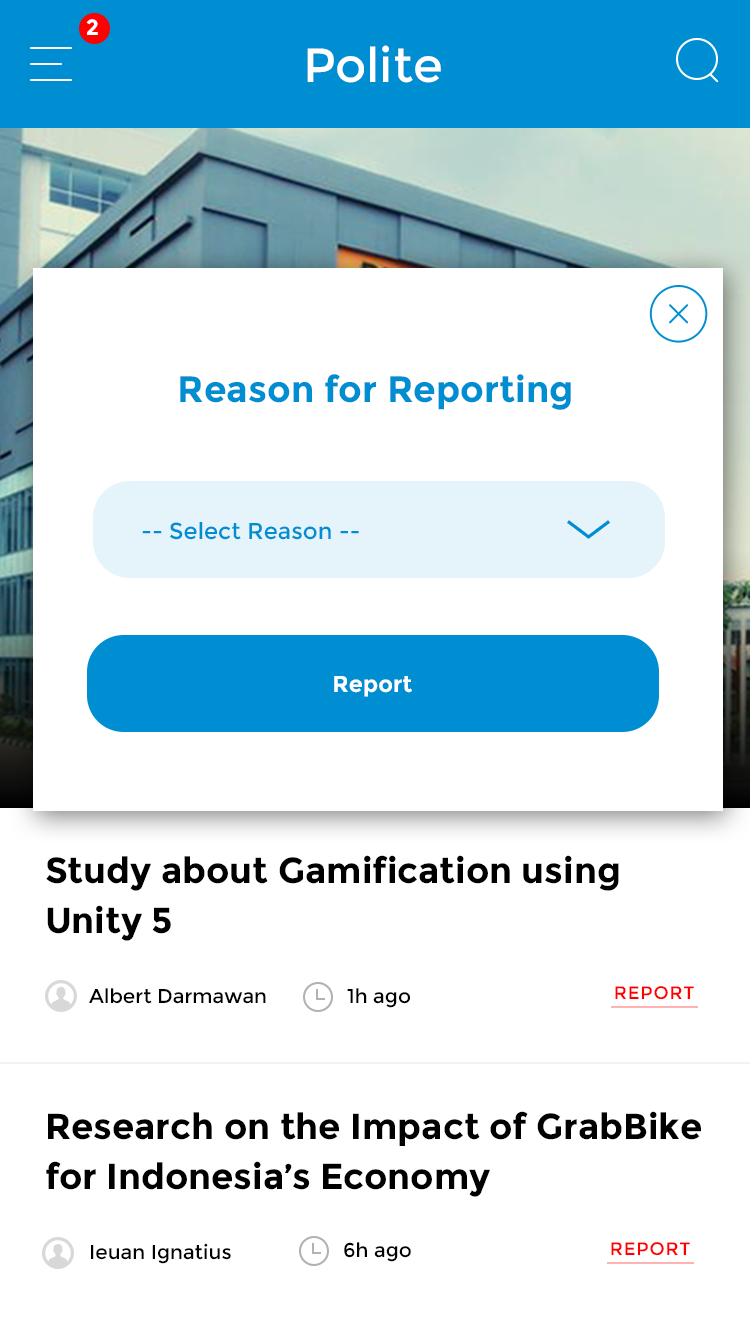
<style>
.page{position:relative;width:750px;height:1334px;background:#ffffff}
.page>*{position:absolute;margin:0}
.t1{font:22px "Montserrat-Bold";letter-spacing:0.05em;color:#ffffff}
.t2{font:48px "Montserrat-Regular";color:#ffffff}
.t3{font:36.6px "Montserrat-Bold";color:#008ed3}
.t4{font:22.9px "Montserrat-Regular";color:#008ed3}
.t5{font:22.9px "Montserrat-Bold";color:#ffffff}
.t6{font:36px/50px "Montserrat-Bold";color:#000000}
.t7{font:20px "Montserrat-Regular";color:#000000}
.t8{font:18px "Montserrat-Regular";letter-spacing:0.05em;color:#ff0000}
</style>
<div class="page">
<p class="t1" style="left:86px;top:19px;width:12px;height:16px">2</p>
<p class="t2" style="left:307px;top:45px;width:134px;height:38px">Polite</p>
<p class="t3" style="left:180px;top:374px;width:391px;height:36px">Reason for Reporting</p>
<p class="t4" style="left:142px;top:522px;width:217px;height:18px">-- Select Reason --</p>
<p class="t5" style="left:334px;top:676px;width:78px;height:21px">Report</p>
<p class="t6" style="left:46px;top:855px;width:573px;height:86px">Study about Gamification using <br>Unity 5</p>
<p class="t7" style="left:89px;top:988px;width:177px;height:16px">Albert Darmawan</p>
<p class="t7" style="left:347px;top:988px;width:63px;height:20px">1h ago</p>
<p class="t8" style="left:615px;top:986px;width:79px;height:14px">REPORT</p>
<p class="t6" style="left:46px;top:1111px;width:655px;height:86px">Research on the Impact of GrabBike<br>for Indonesia’s Economy</p>
<p class="t7" style="left:91px;top:1243px;width:140px;height:21px">Ieuan Ignatius</p>
<p class="t7" style="left:344px;top:1242px;width:67px;height:20px">6h ago</p>
<p class="t8" style="left:611px;top:1242px;width:79px;height:14px">REPORT</p>
</div>
